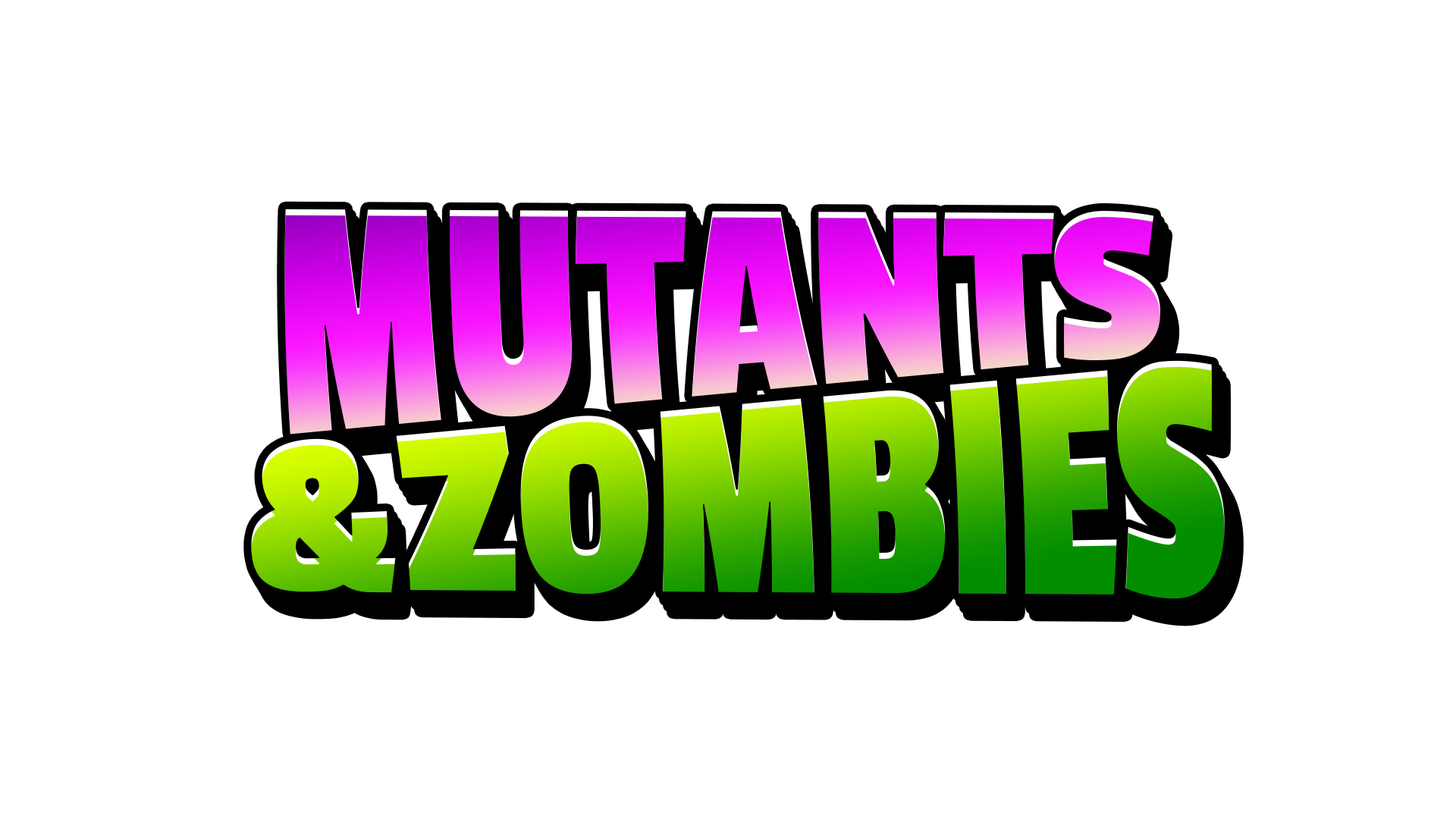
<style>
.page{position:relative;width:1456px;height:819px;background:#ffffff}
.page>*{position:absolute;margin:0}
.t1{font:223.2px "PassionOne-Bold"}
</style>
<div class="page">
<p class="t1" style="left:284px;top:209px;width:876px;height:226px;rotate:-2deg">MUTANTS</p>
<p class="t1" style="left:251px;top:360px;width:974px;height:239px;rotate:-2deg">&amp;ZOMBIES</p>
</div>
